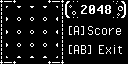
<style>
.page{position:relative;width:128px;height:64px;background:#000000}
.page>*{position:absolute;margin:0}
.t1{font:16px "PixelOperator-Bold";color:#ffffff}
.t2{font:16px "PixelOperator";color:#ffffff}
</style>
<div class="page">
<p class="t1" style="left:81px;top:5px;width:30px;height:9px">2048</p>
<p class="t2" style="left:69px;top:26px;width:52px;height:9px">[A]Score</p>
<p class="t2" style="left:69px;top:45px;width:53px;height:9px">[AB] Exit</p>
</div>
